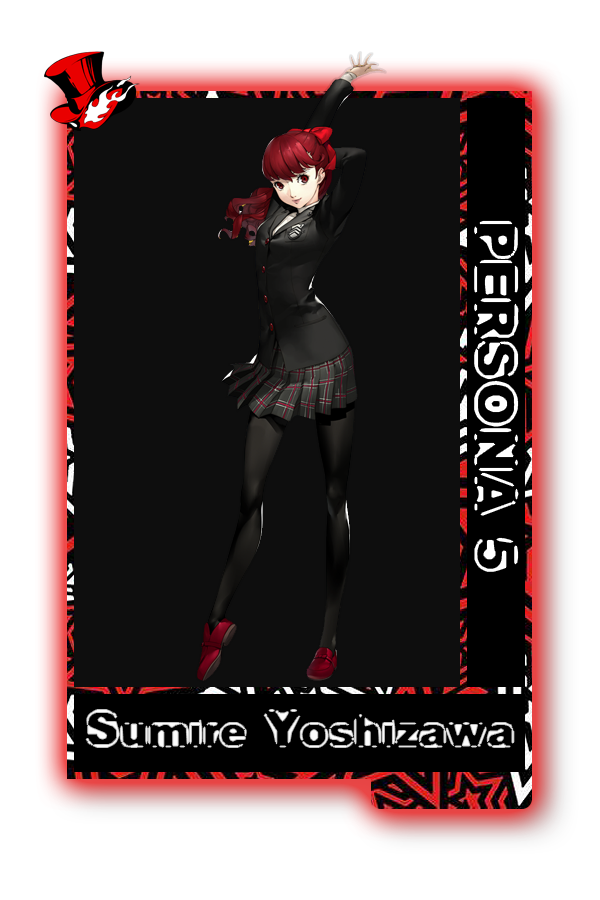
<style>
.page{position:relative;width:600px;height:900px;background:#0e0e0e}
.page>*{position:absolute;margin:0}
.t1{font:41.7px "Untitled";color:#ffffff}
.t2{font:37.5px "Untitled";letter-spacing:-0.06em;color:#fdfdfd}
</style>
<div class="page">
<p class="t1" style="left:475px;top:221px;width:43px;height:350px;rotate:90deg">PERSONA 5</p>
<p class="t2" style="left:86px;top:710px;width:428px;height:37px">Sumire Yoshizawa</p>
</div>
